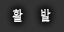
<style>
.page{position:relative;width:64px;height:32px;background:#333333}
.page>*{position:absolute;margin:0}
.t1{font:19px "KoreanYS-B";letter-spacing:0.3em;color:#ffffff;scale:0.6 1}
</style>
<div class="page">
<p class="t1" style="left:12px;top:9px;width:39px;height:13px">활　발</p>
</div>
